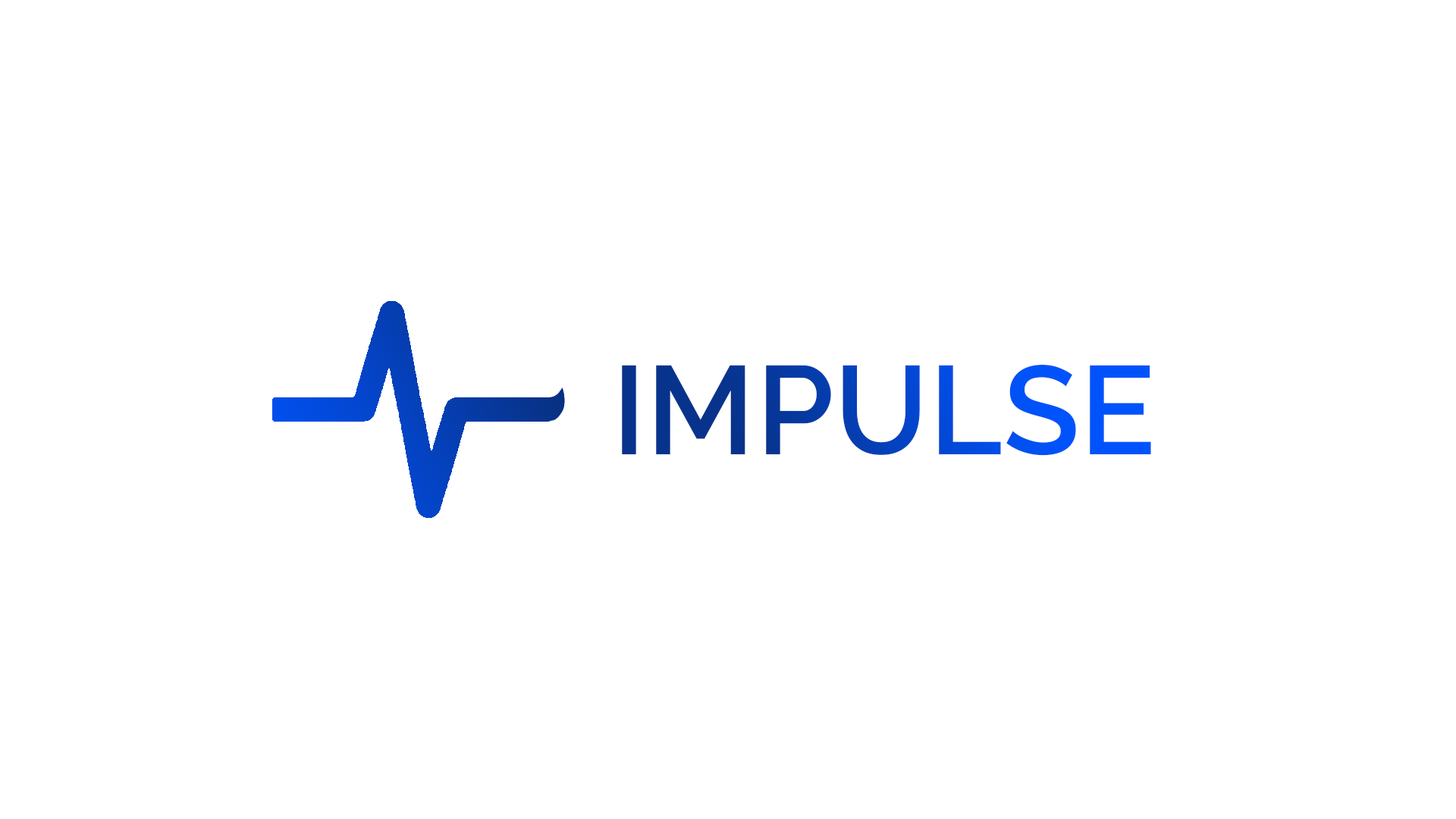
<style>
.page{position:relative;width:1456px;height:819px;background:#ffffff}
.page>*{position:absolute;margin:0}
.t1{font:125.2px "Raleway-SemiBold";letter-spacing:0.005em}
</style>
<div class="page">
<p class="t1" style="left:622px;top:365px;width:529px;height:91px">IMPULSE</p>
</div>
